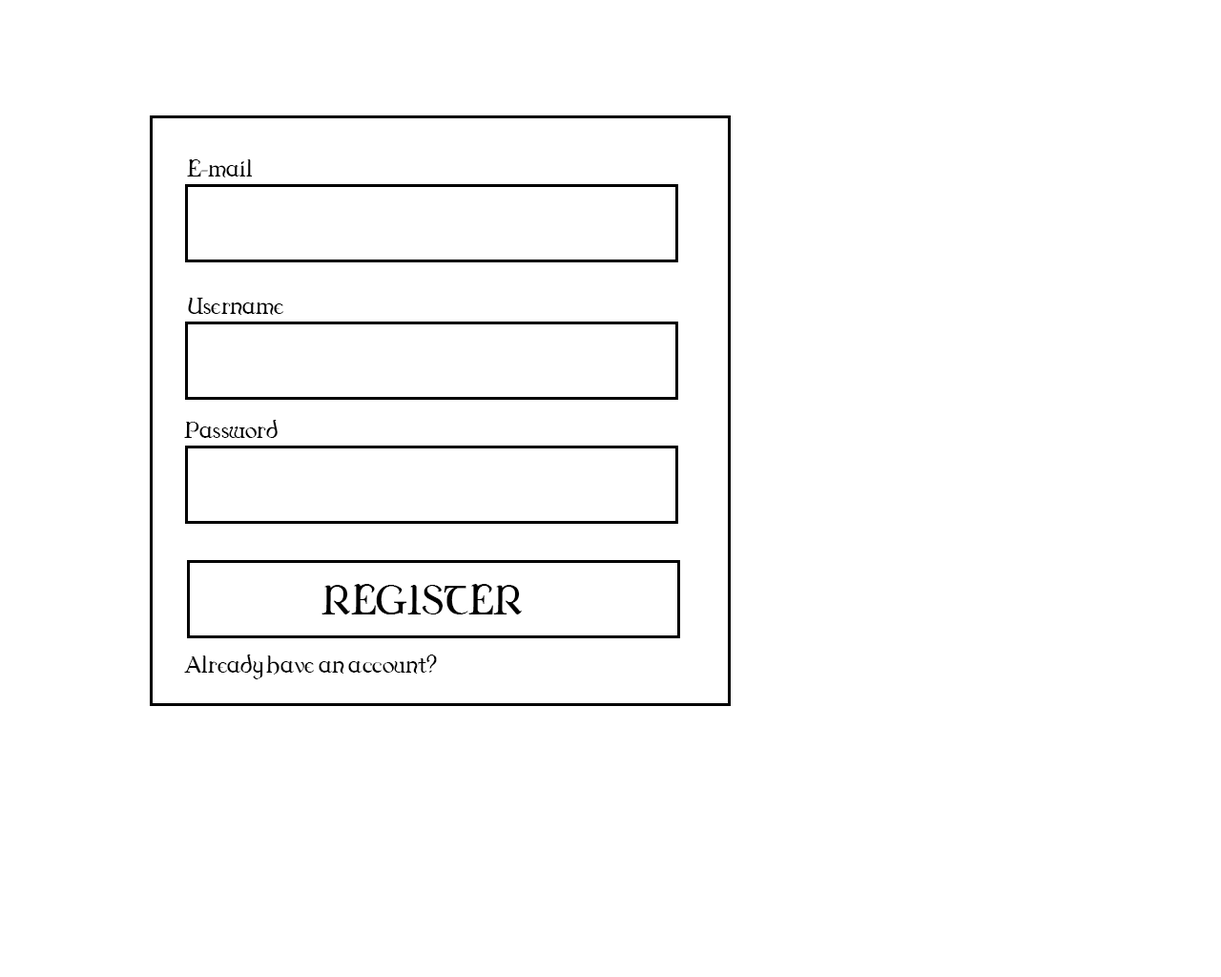
<style>
.page{position:relative;width:1221px;height:977px;background:#ffffff}
.page>*{position:absolute;margin:0}
.t1{font:34.3px "Dungeon";color:#000000}
.t2{font:60.6px "Dungeon";color:#000000}
</style>
<div class="page">
<p class="t1" style="left:187px;top:159px;width:66px;height:18px">E-mail</p>
<p class="t1" style="left:188px;top:298px;width:96px;height:17px">Username</p>
<p class="t1" style="left:184px;top:420px;width:94px;height:18px">Password</p>
<p class="t2" style="left:321px;top:584px;width:201px;height:30px">REGISTER</p>
<p class="t1" style="left:184px;top:654px;width:253px;height:25px">Already have an account?</p>
</div>
